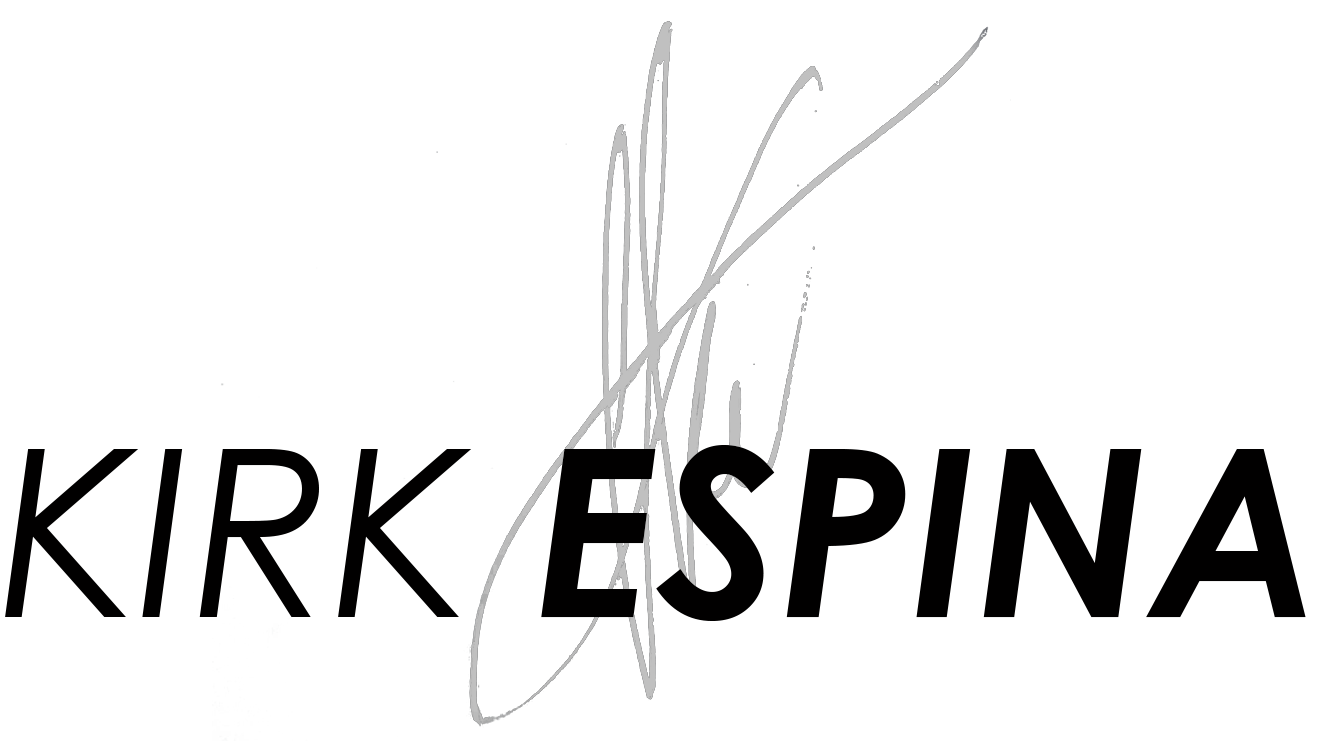
<style>
.page{position:relative;width:1322px;height:741px;background:#ffffff}
.page>*{position:absolute;margin:0}
.t1{font:234px "CenturyGothic-BoldItalic";color:#010000}
.t2{font:234px "CenturyGothic-Italic";color:#010000}
</style>
<div class="page">
<p class="t1" style="left:5px;top:445px;width:1301px;height:176px"><span class="t2">KIRK </span>ESPINA</p>
</div>
